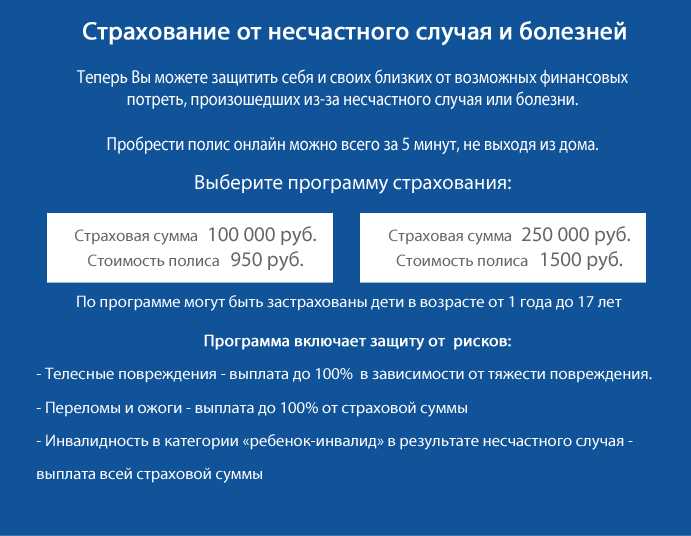
<style>
.page{position:relative;width:691px;height:536px;background:#115399}
.page>*{position:absolute;margin:0}
.t1{font:25px "MyriadPro-Regular";color:#ffffff;font-weight:bold}
.t2{font:18.7px "MyriadPro-Regular";color:#ffffff;scale:0.87 1}
.t3{font:20.8px "MyriadPro-Regular";color:#ffffff}
.t4{font:16.7px "MyriadPro-Regular";color:#656565}
.t5{font:20.8px "MyriadPro-Regular";color:#656565}
.t6{font:16.7px "MyriadPro-Regular";color:#ffffff}
.t7{font:16.7px/33.3px "MyriadPro-Regular";color:#ffffff}
.t8{font:16.7px/33.3px "MyriadPro-Regular";color:#ffffff;font-weight:bold}
</style>
<div class="page">
<p class="t1" style="left:83px;top:21px;width:543px;height:25px">Страхование от несчастного случая и болезней</p>
<p class="t2" style="left:77px;top:69px;width:551px;height:86px;text-align:center">Теперь Вы можете защитить себя и своих близких от возможных финансовых потреть, произошедших из-за несчастного случая или болезни. <br><br>Пробрести полис онлайн можно всего за 5 минут, не выходя из дома.</p>
<p class="t3" style="left:195px;top:174px;width:316px;height:20px">Выберите программу страхования:</p>
<p class="t4" style="left:75px;top:226px;width:241px;height:45px;text-align:center">Страховая сумма<span class="t5">  100 000 руб.<br></span>Стоимость полиса   <span class="t5">950 руб.</span></p>
<p class="t4" style="left:389px;top:226px;width:241px;height:45px;text-align:center">Страховая сумма<span class="t5">  250 000 руб.<br></span>Стоимость полиса   <span class="t5">1500 руб.</span></p>
<p class="t6" style="left:77px;top:295px;width:545px;height:16px">По программе могут быть застрахованы дети в возрасте от 1 года до 17 лет</p>
<p class="t7" style="left:36px;top:334px;width:616px;height:149px;text-align:center"><span class="t8">Программа включает защиту от  рисков:<br></span>- Телесные повреждения - выплата до 100%  в зависимости от тяжести повреждения.<br>- Переломы и ожоги - выплата до 100% от страховой суммы <br>- Инвалидность в категории «ребенок-инвалид» в результате несчастного случая -  выплата всей страховой суммы</p>
</div>
